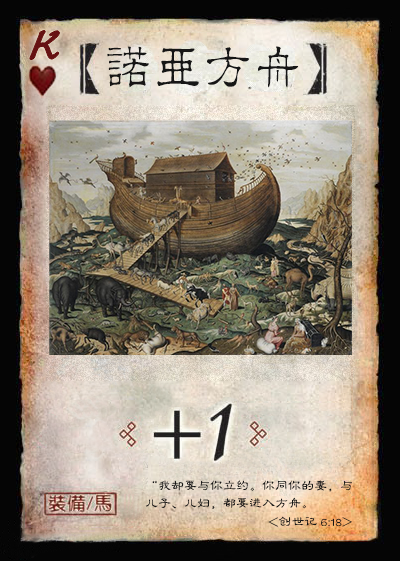
<style>
.page{position:relative;width:400px;height:561px}
.page>*{position:absolute;margin:0}
.t1{font:50px "Jxixinkai";color:#661213;font-weight:bold;font-style:italic}
.t2{font:50px "¾­µä·±½ÇÁ¥ Regular";color:#161616}
.t3{font:13px/17.5px "FZLBJW--GB1-0";color:#161616}
.t4{font:13px "FZLBJW--GB1-0";color:#161616}
</style>
<div class="page">
<p class="t1" style="left:30px;top:30px;width:30px;height:30px">K</p>
<p class="t2" style="left:107px;top:46px;width:192px;height:42px">诺亚方舟</p>
<p class="t3" style="left:145px;top:480px;width:207px;height:29px">“我却要与你立约。你同你的妻，与<br>儿子、儿妇，都要进入方舟。</p>
<p class="t4" style="left:268px;top:516px;width:84px;height:11px">&lt;创世记 6:18&gt;</p>
</div>
